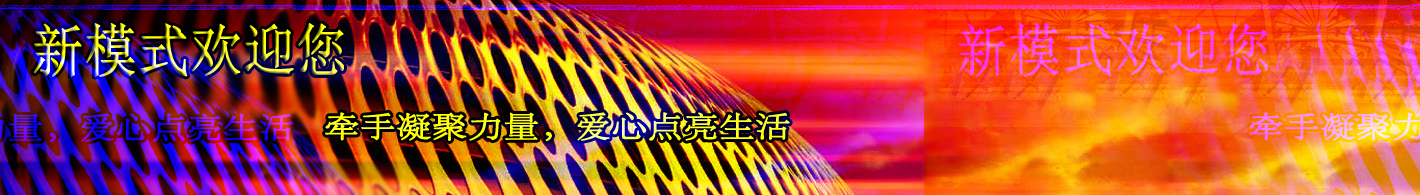
<style>
.page{position:relative;width:1420px;height:195px}
.page>*{position:absolute;margin:0}
.t1{font:98.2px "SimSun";font-weight:bold;scale:0.9 1}
.t2{font:50px "STSong";color:#ffff14;font-weight:bold;scale:1.2 1}
</style>
<div class="page">
<p class="t1" style="left:33px;top:22px;width:311px;height:55px">新模式欢迎您</p>
<p class="t2" style="left:325px;top:112px;width:465px;height:30px">牵手凝聚力量，爱心点亮生活</p>
</div>
